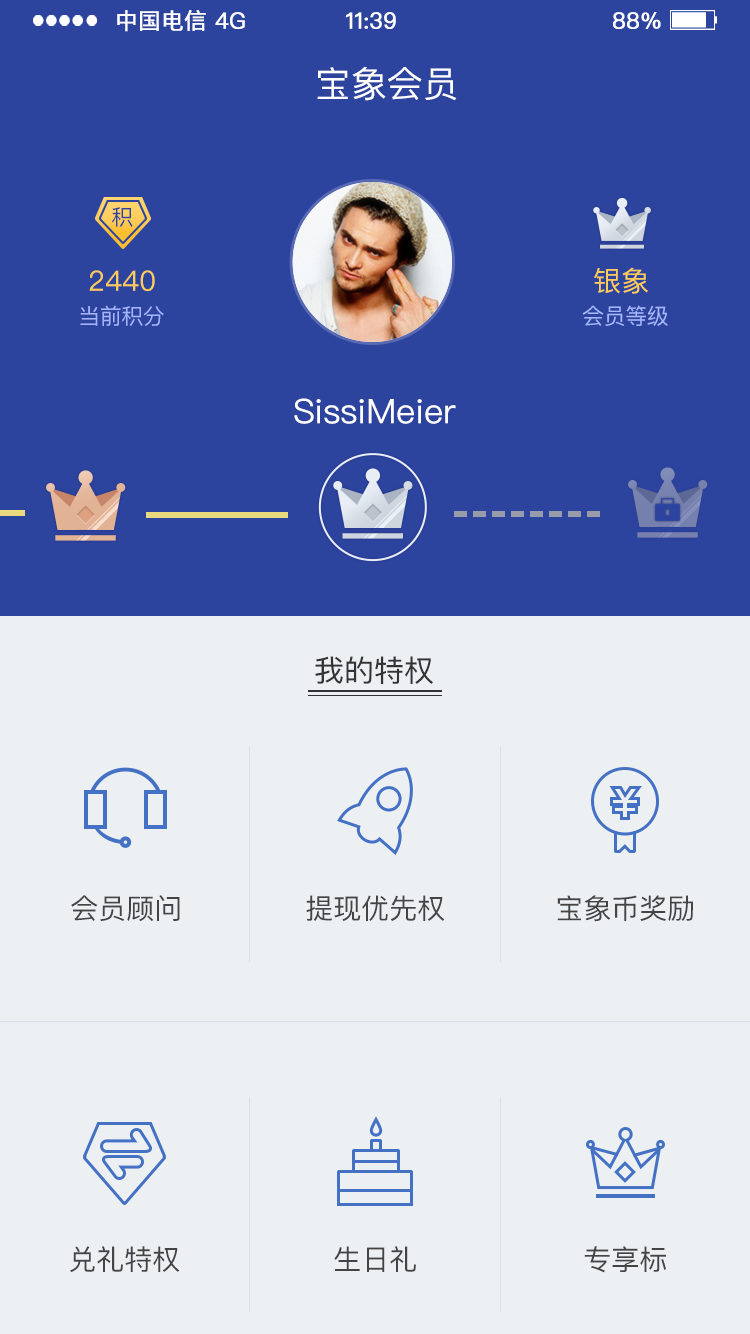
<style>
.page{position:relative;width:750px;height:1334px;background:#edf0f3}
.page>*{position:absolute;margin:0}
.t1{font:22.5px "PingFangSC-Regular";color:#ffffff;text-transform:uppercase;font-weight:bold}
.t2{font:36px "PingFangSC-Regular";color:#ffffff;text-transform:uppercase}
.t3{font:22px "PingFangSC-Regular";color:#2d449f}
.t4{font:28px "PingFangSC-Regular";color:#fecd59}
.t5{font:22px "PingFangSC-Regular";color:#a4b6ff}
.t6{font:22px "PingFangSC-Regular";color:#a5b7ff}
.t7{font:34px "PingFangSC-Regular";color:#ffffff}
.t8{font:34px "PingFangSC-Regular";color:#ffffff;text-transform:uppercase}
.t9{font:30px "PingFangSC-Regular";color:#333333}
.t10{font:28px "PingFangSC-Regular";color:#444444;text-transform:uppercase}
</style>
<div class="page">
<p class="t1" style="left:117px;top:10px;width:89px;height:22px">中国电信</p>
<p class="t1" style="left:215px;top:12px;width:30px;height:17px">4G</p>
<p class="t1" style="left:345px;top:12px;width:51px;height:17px">11:39</p>
<p class="t1" style="left:613px;top:12px;width:48px;height:17px">88%</p>
<p class="t2" style="left:317px;top:66px;width:140px;height:35px">宝象会员</p>
<p class="t3" style="left:112px;top:207px;width:21px;height:20px">积</p>
<p class="t4" style="left:89px;top:270px;width:66px;height:22px">2440</p>
<p class="t4" style="left:594px;top:267px;width:54px;height:27px">银象</p>
<p class="t5" style="left:80px;top:305px;width:84px;height:21px">当前积分</p>
<p class="t6" style="left:582px;top:305px;width:86px;height:21px">会员等级</p>
<p class="t7" style="left:294px;top:398px;width:162px;height:26px"><span class="t8">S</span>issiMeier</p>
<p class="t9" style="left:315px;top:656px;width:118px;height:29px">我的特权</p>
<p class="t10" style="left:71px;top:895px;width:109px;height:27px">会员顾问</p>
<p class="t10" style="left:306px;top:895px;width:139px;height:27px">提现优先权</p>
<p class="t10" style="left:557px;top:895px;width:136px;height:27px">宝象币奖励</p>
<p class="t10" style="left:70px;top:1246px;width:110px;height:27px">兑礼特权</p>
<p class="t10" style="left:334px;top:1246px;width:82px;height:26px">生日礼</p>
<p class="t10" style="left:584px;top:1246px;width:82px;height:27px">专享标</p>
</div>
